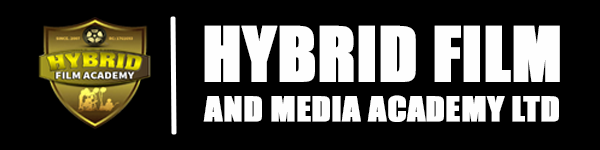
<style>
.page{position:relative;width:600px;height:150px;background:#000000}
.page>*{position:absolute;margin:0}
.t1{font:69.8px "Impact";color:#fefefe;text-transform:uppercase;font-weight:bold}
.t2{font:31.5px "Impact";color:#fefefe;text-transform:uppercase;font-weight:bold;scale:1.1 1}
</style>
<div class="page">
<p class="t1" style="left:204px;top:25px;width:356px;height:57px">Hybrid film</p>
<p class="t2" style="left:203px;top:95px;width:356px;height:27px">and media academy ltd</p>
</div>
